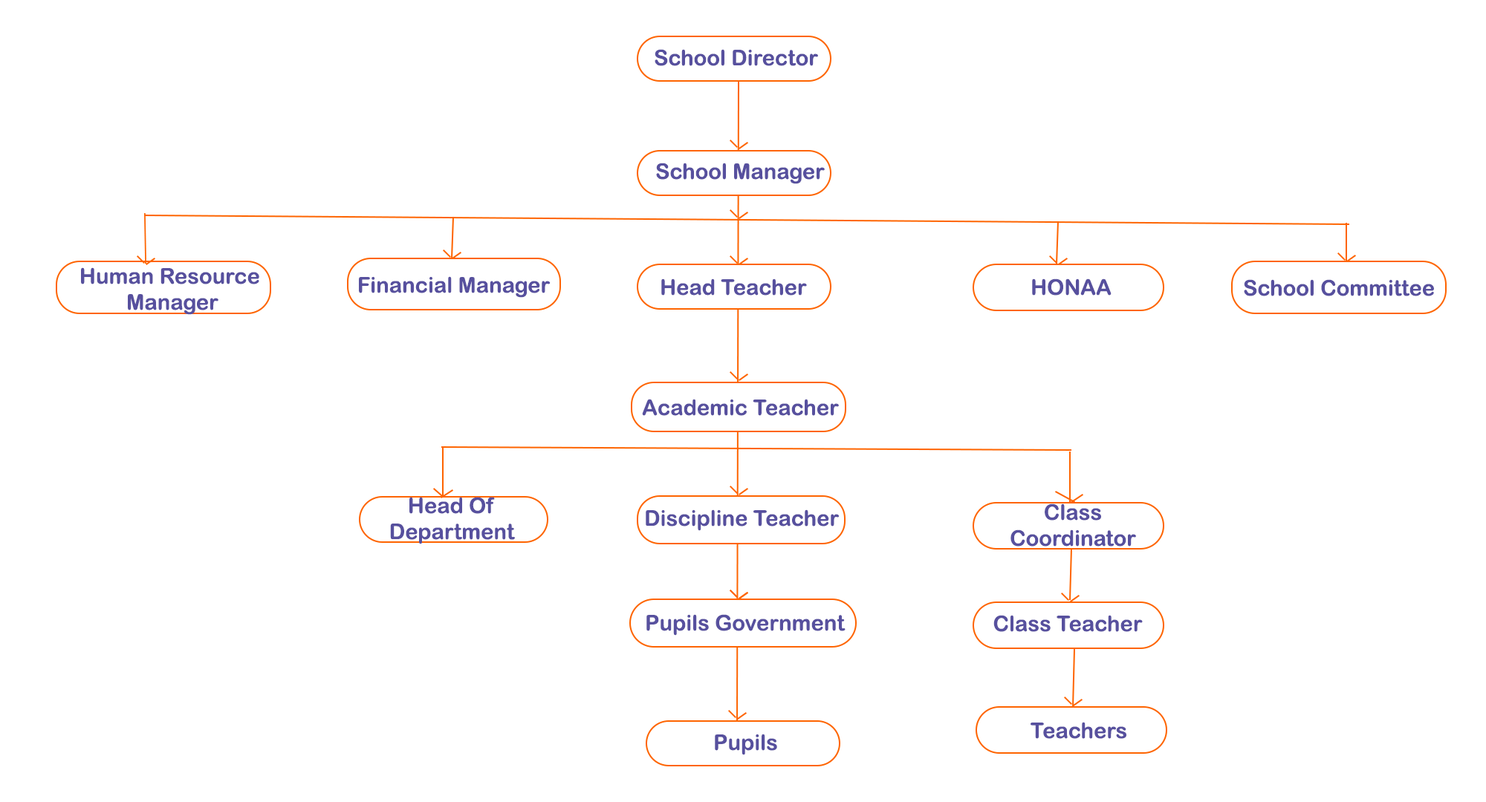
<style>
.page{position:relative;width:1486px;height:802px;background:#ffffff}
.page>*{position:absolute;margin:0}
.t1{font:21.7px "ArialRoundedMTBold";color:#57509e}
</style>
<div class="page">
<p class="t1" style="left:655px;top:49px;width:163px;height:17px">School Director</p>
<p class="t1" style="left:656px;top:163px;width:169px;height:21px">School Manager</p>
<p class="t1" style="left:81px;top:267px;width:178px;height:48px;text-align:center">Human Resource <br>Manager</p>
<p class="t1" style="left:359px;top:276px;width:192px;height:22px">Financial Manager</p>
<p class="t1" style="left:661px;top:279px;width:146px;height:17px">Head Teacher</p>
<p class="t1" style="left:1032px;top:279px;width:80px;height:17px">HONAA</p>
<p class="t1" style="left:1244px;top:279px;width:190px;height:17px">School Committee</p>
<p class="t1" style="left:642px;top:399px;width:197px;height:17px">Academic Teacher</p>
<p class="t1" style="left:390px;top:497px;width:125px;height:48px;text-align:center">Head Of<br>Department</p>
<p class="t1" style="left:646px;top:510px;width:194px;height:21px">Discipline Teacher</p>
<p class="t1" style="left:1010px;top:504px;width:126px;height:43px;text-align:center">Class<br>Coordinator</p>
<p class="t1" style="left:646px;top:614px;width:200px;height:22px">Pupils Government</p>
<p class="t1" style="left:993px;top:615px;width:150px;height:17px">Class Teacher</p>
<p class="t1" style="left:1031px;top:722px;width:95px;height:17px">Teachers</p>
<p class="t1" style="left:715px;top:734px;width:62px;height:22px">Pupils</p>
</div>
